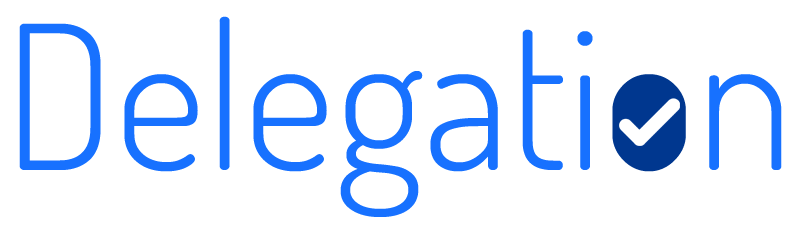
<style>
.page{position:relative;width:799px;height:227px;background:#ffffff}
.page>*{position:absolute;margin:0}
.t1{font:200px "Dosis-Light";color:#1771ff}
.t2{font:200px "Dosis-Light";color:#00378f}
</style>
<div class="page">
<p class="t1" style="left:19px;top:16px;width:763px;height:201px">Delegati<span class="t2">o</span>n</p>
</div>
